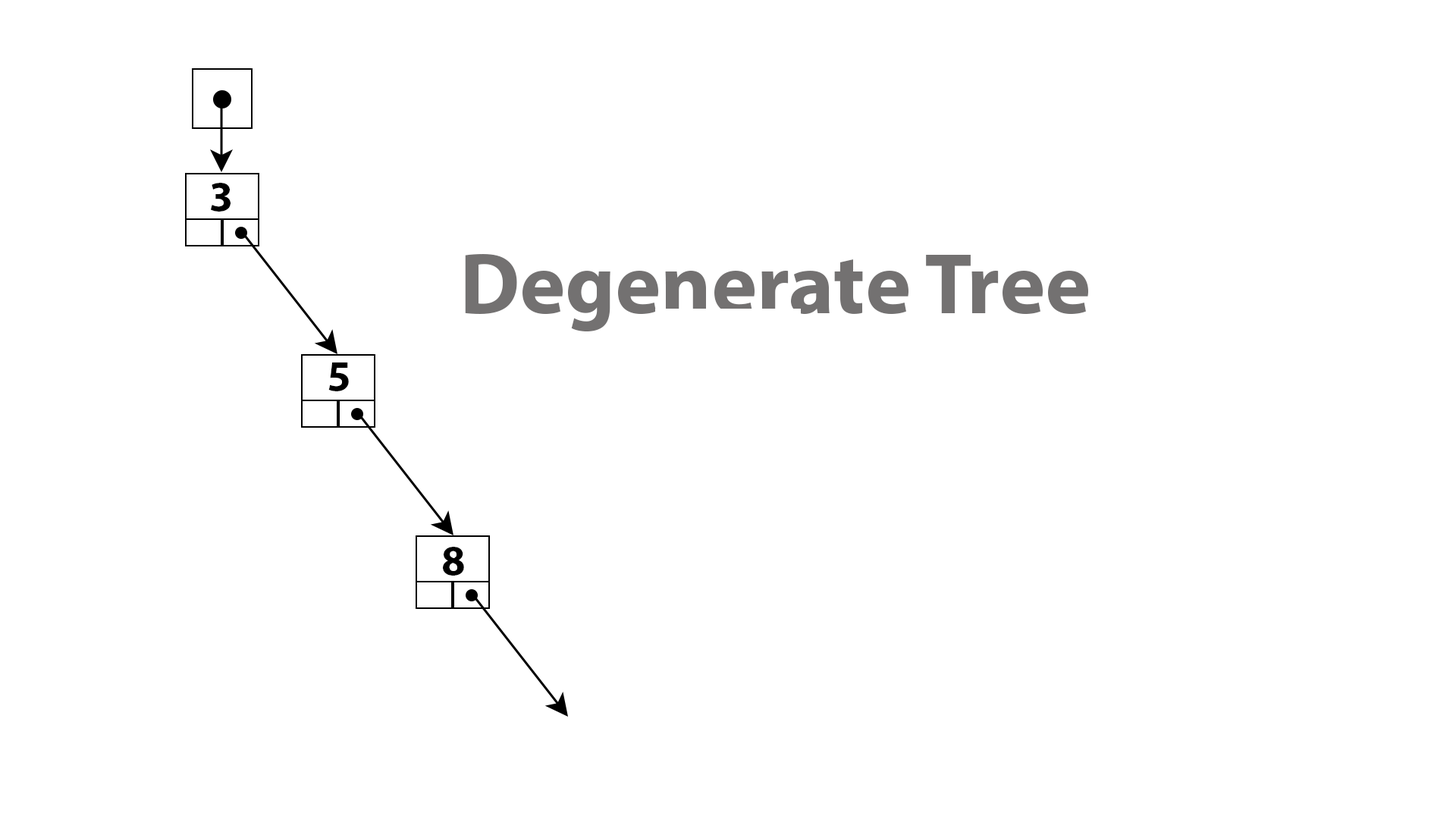
<style>
.page{position:relative;width:1456px;height:819px;background:#ffffff}
.page>*{position:absolute;margin:0}
.t1{font:43.1px "MyriadPro-Bold";color:#000000}
.t2{font:86.3px "MyriadPro-Bold";color:#737171}
</style>
<div class="page">
<p class="t1" style="left:211px;top:183px;width:20px;height:29px">3</p>
<p class="t2" style="left:465px;top:254px;width:623px;height:78px">Degenerate Tree</p>
<p class="t1" style="left:328px;top:362px;width:21px;height:29px">5</p>
<p class="t1" style="left:443px;top:547px;width:21px;height:29px">8</p>
</div>
